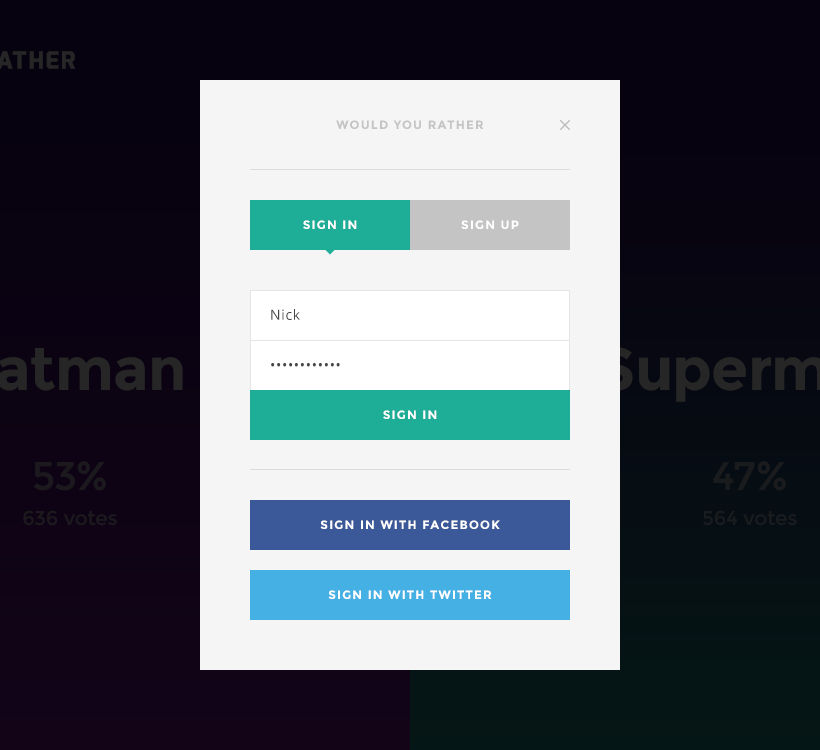
<style>
.page{position:relative;width:820px;height:750px;background:#f5f5f5}
.page>*{position:absolute;margin:0}
.t1{font:12px "Montserrat-Bold";letter-spacing:0.1em;color:#c4c4c4;text-transform:uppercase}
.t2{font:12px "Montserrat-Bold";letter-spacing:0.1em;color:#ffffff;text-transform:uppercase}
.t3{font:14px "OpenSans";letter-spacing:0.05em;color:#444444}
</style>
<div class="page">
<p class="t1" style="left:336px;top:120px;width:148px;height:9px">WOULD YOU RATHER</p>
<p class="t2" style="left:303px;top:220px;width:54px;height:9px">SIGN IN</p>
<p class="t2" style="left:461px;top:220px;width:58px;height:9px">SIGN UP</p>
<p class="t3" style="left:271px;top:309px;width:29px;height:11px">Nick</p>
<p class="t3" style="left:271px;top:363px;width:69px;height:4px">••••••••••••</p>
<p class="t2" style="left:383px;top:410px;width:54px;height:9px">SIGN IN</p>
<p class="t2" style="left:320px;top:520px;width:180px;height:9px">SIGN IN WITH FACEBOOK</p>
<p class="t2" style="left:328px;top:590px;width:164px;height:9px">SIGN IN WITH TWITTER</p>
</div>
